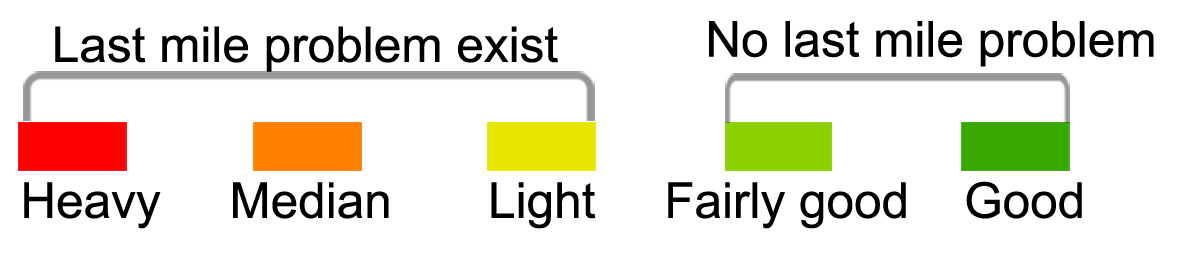
<style>
.page{position:relative;width:1181px;height:275px;background:#ffffff}
.page>*{position:absolute;margin:0}
.t1{font:49.4px "ArialMT";color:#000000}
</style>
<div class="page">
<p class="t1" style="left:55px;top:26px;width:503px;height:46px">Last mile problem exist</p>
<p class="t1" style="left:709px;top:21px;width:445px;height:46px">No last mile problem</p>
<p class="t1" style="left:24px;top:181px;width:1058px;height:48px">Heavy     Median       Light     Fairly good    Good</p>
</div>
